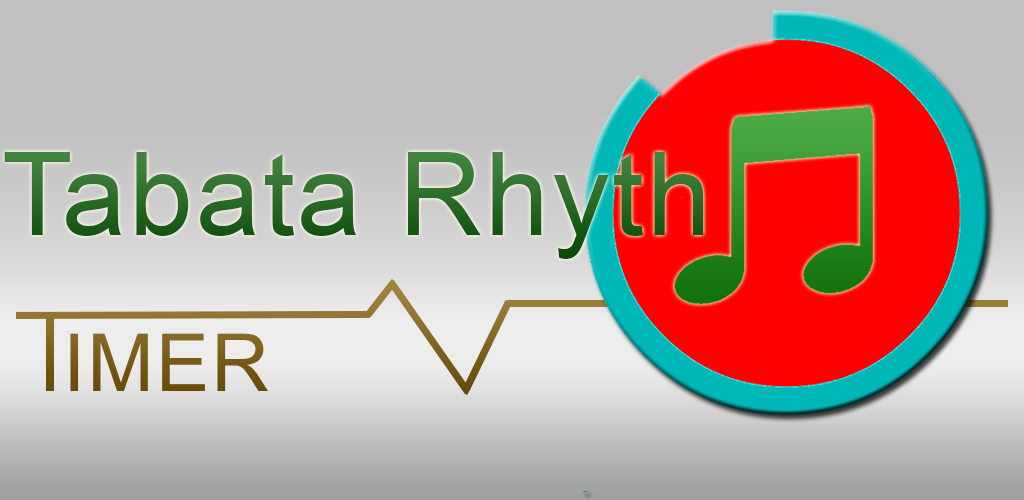
<style>
.page{position:relative;width:1024px;height:500px}
.page>*{position:absolute;margin:0}
.t1{font:115px "ArialMT";letter-spacing:0.025em;color:#2c6c29}
</style>
<div class="page">
<p class="t1" style="left:4px;top:152px;width:700px;height:107px">Tabata Rhyth</p>
</div>
